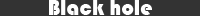
<style>
.page{position:relative;width:200px;height:16px;background:#333333}
.page>*{position:absolute;margin:0}
.t1{font:22.2px "Bauhaus93";color:#ffffff}
</style>
<div class="page">
<p class="t1" style="left:49px;top:0px;width:103px;height:15px">Black hole</p>
</div>
